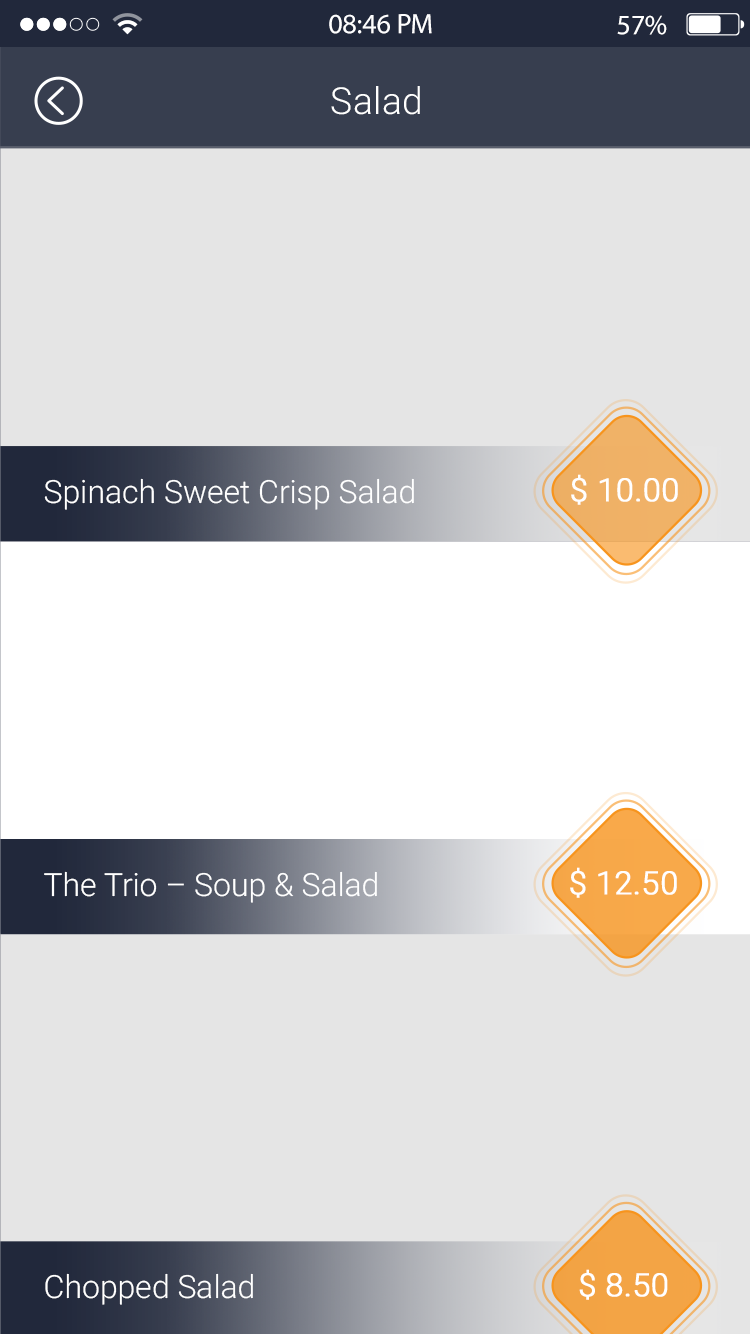
<style>
.page{position:relative;width:750px;height:1334px;background:#e5e5e5}
.page>*{position:absolute;margin:0}
.t1{font:28.2px "MyriadPro-Regular";color:#fefeff}
.t2{font:28.2px "MyriadPro-Regular";color:#ffffff}
.t3{font:37.3px "Roboto-Light";letter-spacing:0.01em;color:#ffffff}
.t4{font:32px "Roboto-Light";color:#ffffff}
.t5{font:32px "Roboto-Light";color:#ffffff;font-weight:bold}
</style>
<div class="page">
<p class="t1" style="left:329px;top:14px;width:103px;height:20px">08:46 PM</p>
<p class="t2" style="left:617px;top:15px;width:50px;height:20px">57%</p>
<p class="t3" style="left:331px;top:86px;width:89px;height:29px">Salad</p>
<p class="t4" style="left:44px;top:478px;width:370px;height:32px">Spinach Sweet Crisp Salad</p>
<p class="t5" style="left:571px;top:474px;width:107px;height:31px">$ 10.00</p>
<p class="t5" style="left:570px;top:867px;width:107px;height:31px">$ 12.50</p>
<p class="t4" style="left:44px;top:871px;width:333px;height:32px">The Trio – Soup &amp; Salad</p>
<p class="t4" style="left:45px;top:1273px;width:208px;height:32px">Chopped Salad</p>
<p class="t5" style="left:579px;top:1269px;width:89px;height:31px">$ 8.50</p>
</div>
